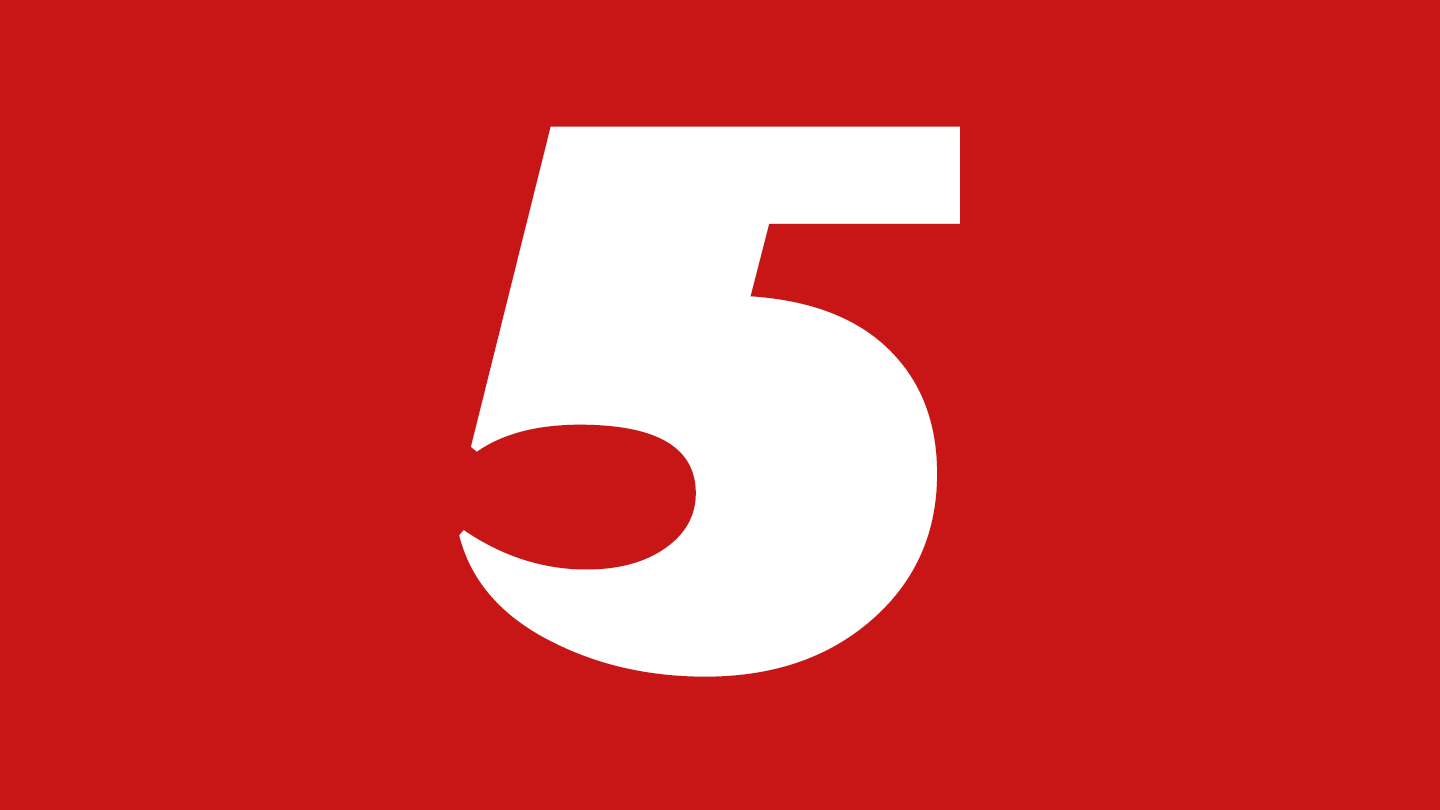
<style>
.page{position:relative;width:1440px;height:810px;background:#c81616}
.page>*{position:absolute;margin:0}
.t1{font:725.7px "GillSans-UltraBold";color:#ffffff}
</style>
<div class="page">
<p class="t1" style="left:459px;top:126px;width:501px;height:551px">5</p>
</div>
